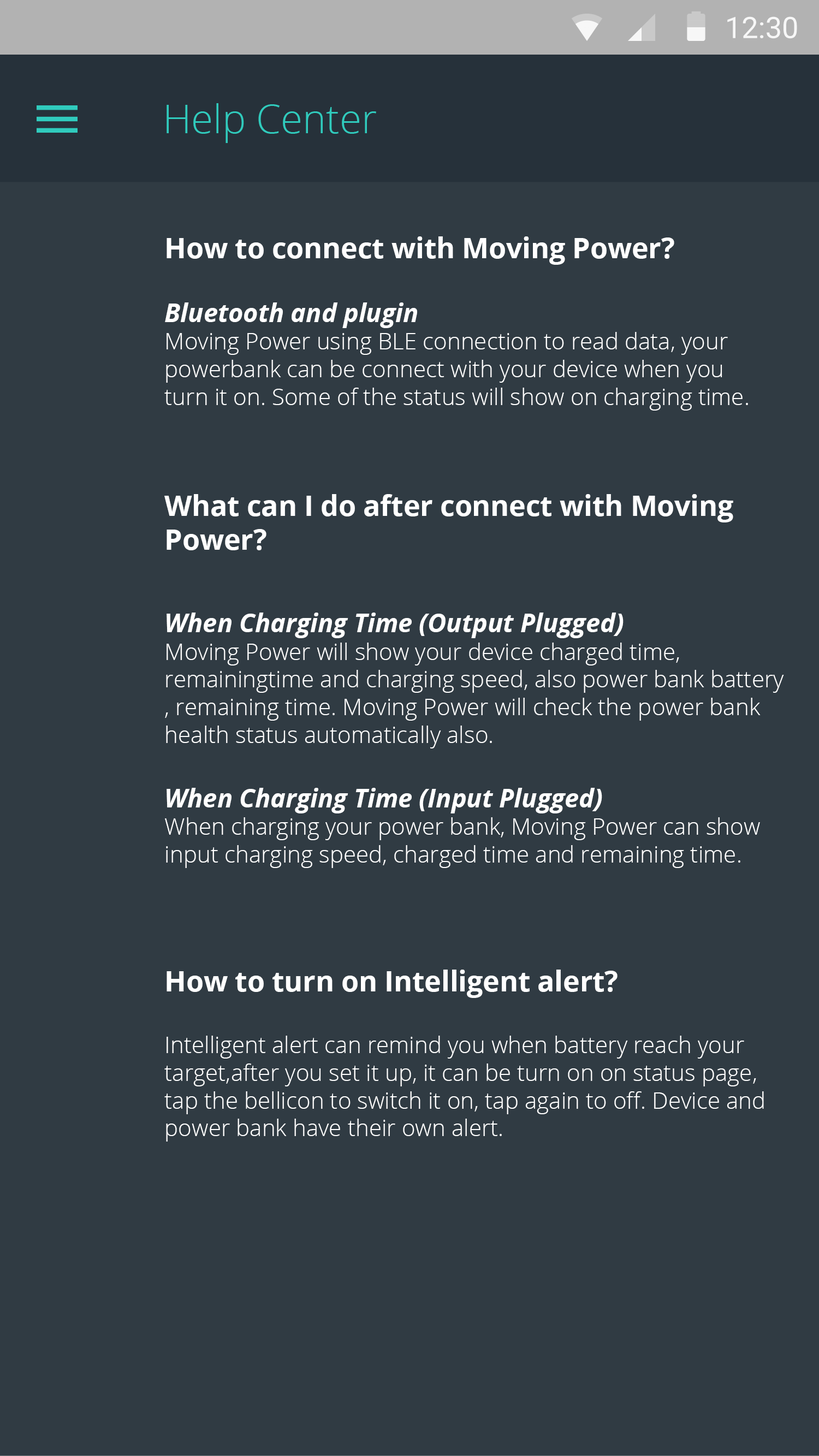
<style>
.page{position:relative;width:819px;height:1456px;background:#303b43}
.page>*{position:absolute;margin:0}
.t1{font:39.8px "OpenSans-Light";color:#30cbbd}
.t2{font:28.2px "OpenSans-Bold";color:#ffffff}
.t3{font:23px "OpenSans-Light";color:#ffffff}
.t4{font:25.6px "OpenSans-BoldItalic";color:#ffffff}
</style>
<div class="page">
<p class="t1" style="left:167px;top:103px;width:209px;height:40px">Help Center</p>
<p class="t2" style="left:167px;top:236px;width:507px;height:29px">How to connect with Moving Power?</p>
<p class="t3" style="left:164px;top:302px;width:584px;height:109px"><span class="t4">Bluetooth and plugin<br></span>Moving Power using BLE connection to read data, your <br>powerbank can be connect with your device when you <br>turn it on. Some of the status will show on charging time.</p>
<p class="t2" style="left:164px;top:494px;width:569px;height:56px">What can I do after connect with Moving <br>Power?</p>
<p class="t3" style="left:165px;top:613px;width:619px;height:136px"><span class="t4">When Charging Time (Output Plugged)<br></span>Moving Power will show your device charged time, <br>remainingtime and charging speed, also power bank battery<br>, remaining time. Moving Power will check the power bank <br>health status automatically also.</p>
<p class="t3" style="left:165px;top:788px;width:595px;height:80px"><span class="t4">When Charging Time (Input Plugged)<br></span>When charging your power bank, Moving Power can show <br>input charging speed, charged time and remaining time.</p>
<p class="t2" style="left:167px;top:970px;width:450px;height:28px">How to turn on Intelligent alert?</p>
<p class="t3" style="left:164px;top:1036px;width:600px;height:106px">Intelligent alert can remind you when battery reach your <br>target,after you set it up, it can be turn on on status page, <br>tap the bellicon to switch it on, tap again to off. Device and <br>power bank have their own alert.</p>
</div>
